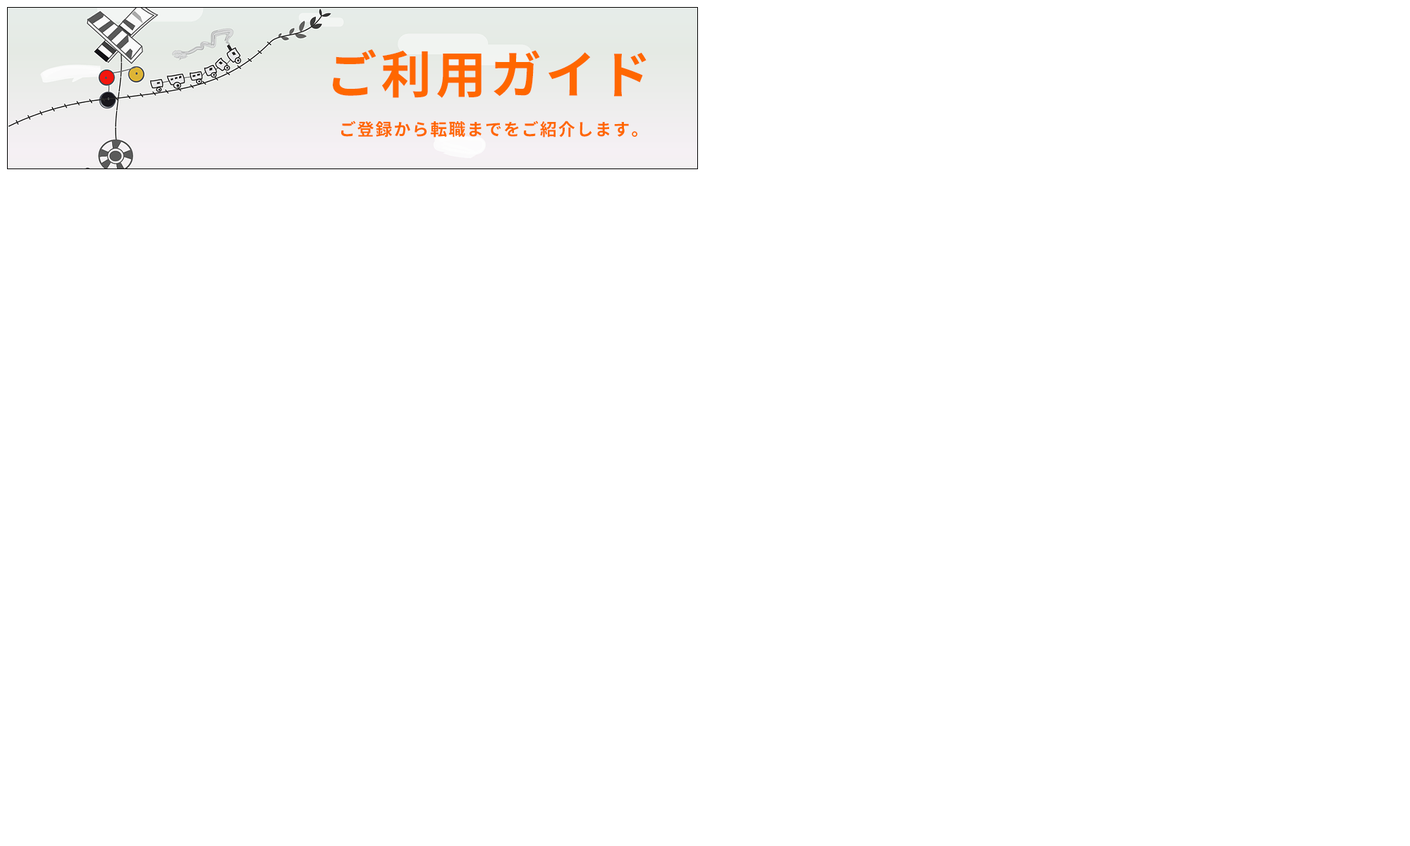
<style>
.page{position:relative;width:1410px;height:846px;background:#ffffff}
.page>*{position:absolute;margin:0}
.t1{font:50.8px "Nasu-Bold";letter-spacing:0.08em;color:#ff6700}
.t2{font:16.9px "Nasu-Bold";letter-spacing:0.08em;color:#ff6700}
</style>
<div class="page">
<p class="t1" style="left:333px;top:49px;width:313px;height:49px">ご利用ガイド</p>
<p class="t2" style="left:341px;top:121px;width:296px;height:16px">ご登録から転職までをご紹介します。</p>
</div>
